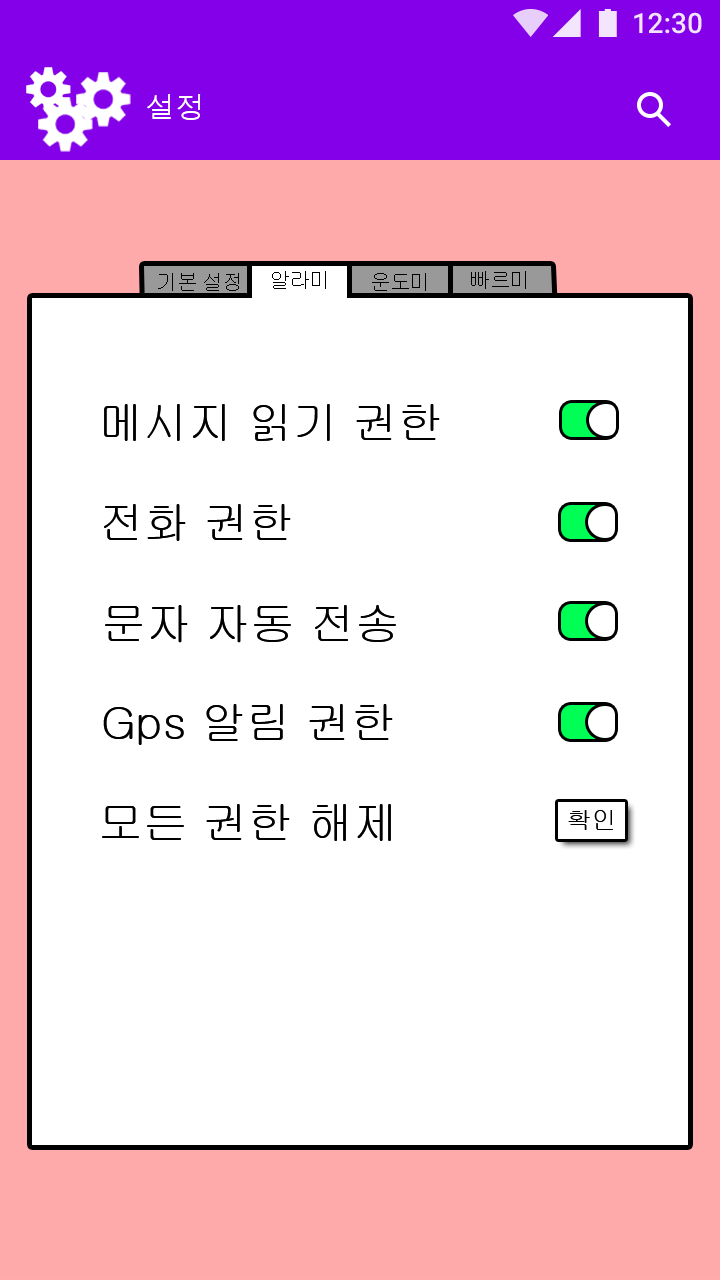
<style>
.page{position:relative;width:720px;height:1280px;background:#ffffff}
.page>*{position:absolute;margin:0}
.t1{font:30px "Dotum";color:#ffffff}
.t2{font:20px "Gulim";color:#000000}
.t3{font:45px "Gulim";color:#000000}
.t4{font:25px "Gulim";color:#000000}
</style>
<div class="page">
<p class="t1" style="left:147px;top:94px;width:54px;height:26px">설정</p>
<p class="t2" style="left:158px;top:273px;width:81px;height:18px">기본 설정</p>
<p class="t2" style="left:272px;top:271px;width:54px;height:18px">알라미</p>
<p class="t2" style="left:372px;top:273px;width:54px;height:18px">운도미</p>
<p class="t2" style="left:471px;top:271px;width:55px;height:18px">빠르미</p>
<p class="t3" style="left:104px;top:404px;width:336px;height:37px">메시지 읽기 권한</p>
<p class="t3" style="left:104px;top:504px;width:187px;height:37px">전화 권한</p>
<p class="t3" style="left:105px;top:605px;width:291px;height:38px">문자 자동 전송</p>
<p class="t3" style="left:103px;top:704px;width:290px;height:41px">Gps 알림 권한</p>
<p class="t3" style="left:102px;top:804px;width:289px;height:37px">모든 권한 해제</p>
<p class="t4" style="left:568px;top:810px;width:45px;height:20px">확인</p>
</div>
